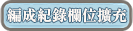
<style>
.page{position:relative;width:133px;height:31px}
.page>*{position:absolute;margin:0}
.t1{font:15px "RyuminPr6N-ExBold";color:#fff9f4}
</style>
<div class="page">
<p class="t1" style="left:7px;top:8px;width:120px;height:15px">編成紀錄欄位擴充</p>
</div>
